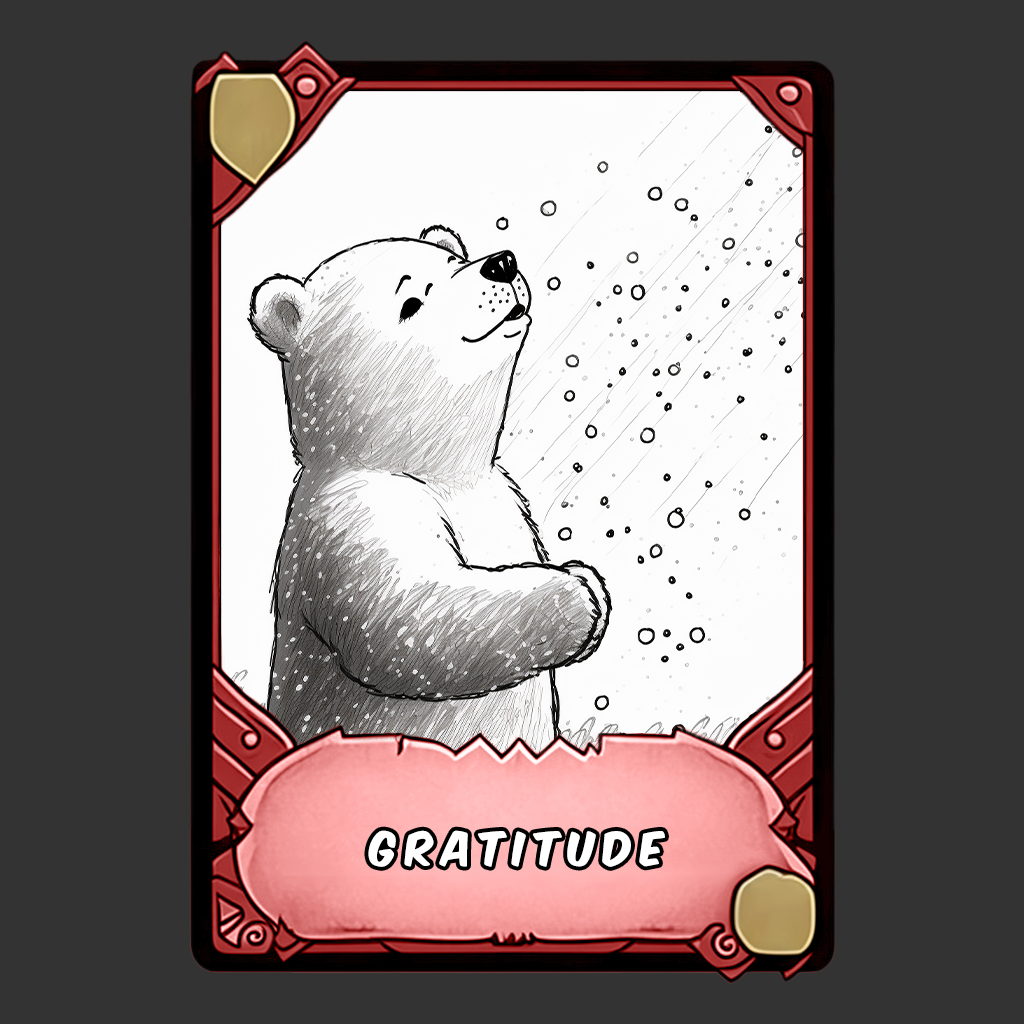
<style>
.page{position:relative;width:1024px;height:1024px;background:#333333}
.page>*{position:absolute;margin:0}
.t1{font:40px "KomikaAxis";letter-spacing:0.2em;color:#ffffff}
</style>
<div class="page">
<p class="t1" style="left:368px;top:830px;width:297px;height:37px">gratitude</p>
</div>
